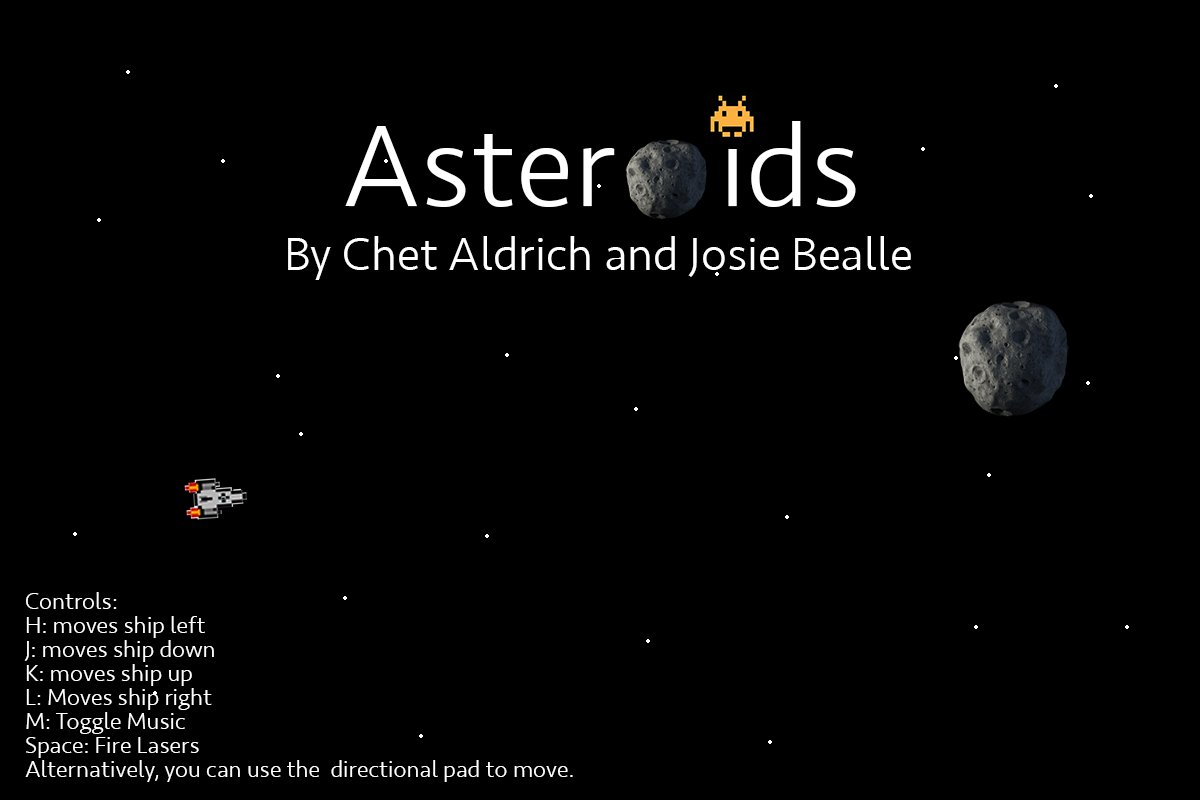
<style>
.page{position:relative;width:1200px;height:800px;background:#000000}
.page>*{position:absolute;margin:0}
.t1{font:120px "Seravek-Light";color:#ffffff}
.t2{font:48px "Seravek-Light";color:#ffffff}
.t3{font:24px/24px "Seravek-Light";color:#ffffff}
</style>
<div class="page">
<p class="t1" style="left:345px;top:121px;width:511px;height:86px">Aster    ids</p>
<p class="t2" style="left:288px;top:236px;width:623px;height:44px">By Chet Aldrich and Josie Bealle</p>
<p class="t3" style="left:24px;top:592px;width:549px;height:190px">Controls:  <br>H: moves ship left<br>J: moves ship down<br>K: moves ship up <br>L: Moves ship right<br>M: Toggle Music<br>Space: Fire Lasers<br>Alternatively, you can use the  directional pad to move.</p>
</div>
